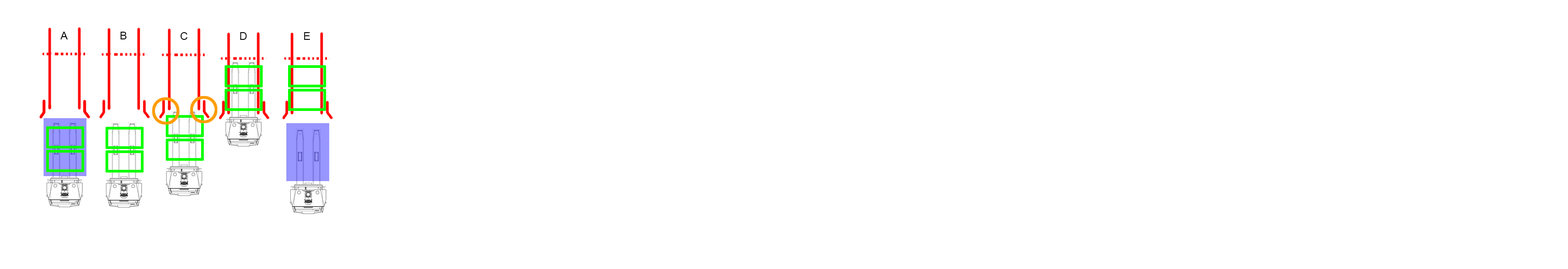
<style>
.page{position:relative;width:1568px;height:269px;background:#ffffff}
.page>*{position:absolute;margin:0}
.t1{font:10.9px "ArialMT";color:#000000}
</style>
<div class="page">
<p class="t1" style="left:60px;top:32px;width:8px;height:7px">A</p>
<p class="t1" style="left:120px;top:32px;width:7px;height:7px">B</p>
<p class="t1" style="left:180px;top:32px;width:8px;height:8px">C</p>
<p class="t1" style="left:240px;top:32px;width:7px;height:8px">D</p>
<p class="t1" style="left:304px;top:32px;width:6px;height:8px">E</p>
</div>
